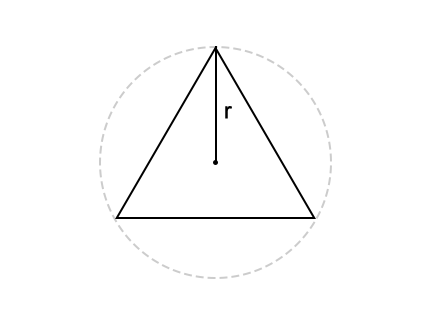
<style>
.page{position:relative;width:430px;height:324px;background:#ffffff}
.page>*{position:absolute;margin:0}
.t1{font:23px "ArialMT";letter-spacing:0.113em;color:#000000}
</style>
<div class="page">
<p class="t1" style="left:225px;top:106px;width:7px;height:13px">r</p>
</div>
